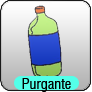
<style>
.page{position:relative;width:92px;height:92px}
.page>*{position:absolute;margin:0}
.t1{font:14.7px "Swiss721BT-RomanCondensed";color:#000000}
</style>
<div class="page">
<p class="t1" style="left:22px;top:78px;width:49px;height:14px">Purgante</p>
</div>
